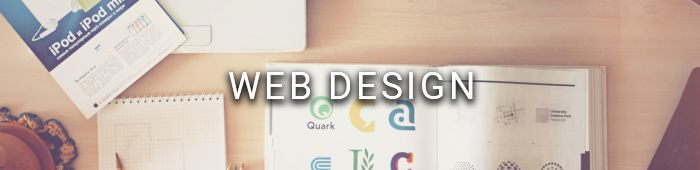
<style>
.page{position:relative;width:700px;height:170px}
.page>*{position:absolute;margin:0}
.t1{font:37px "Roboto-Regular";letter-spacing:0.1em;color:#ffffff}
</style>
<div class="page">
<p class="t1" style="left:229px;top:72px;width:244px;height:27px">WEB DESIGN</p>
</div>
